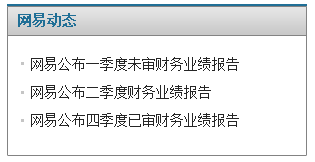
<style>
.page{position:relative;width:315px;height:162px;background:#ffffff}
.page>*{position:absolute;margin:0}
.t1{font:14px "SimSun";color:#206f96;font-weight:bold}
.t2{font:14px/28px "SimSun";color:#252525}
</style>
<div class="page">
<p class="t1" style="left:18px;top:13px;width:58px;height:14px">网易动态</p>
<p class="t2" style="left:31px;top:57px;width:208px;height:70px">网易公布一季度未审财务业绩报告<br>网易公布二季度财务业绩报告<br>网易公布四季度已审财务业绩报告</p>
</div>
